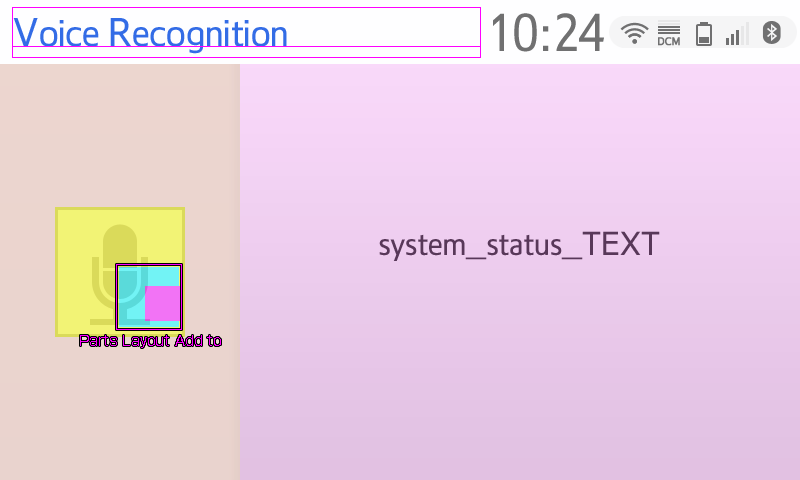
<style>
.page{position:relative;width:800px;height:480px}
.page>*{position:absolute;margin:0}
.t1{font:48px "Tfont1502_T2S";letter-spacing:0.05em;color:#707071}
.t2{font:36px "Tfont1502_T1S";color:#336ce6}
.t3{font:30px "Tfont1502_T1S";color:#583859}
.t4{font:14px "ShinGoPro-Regular";color:#ff00ff}
</style>
<div class="page">
<p class="t1" style="left:493px;top:13px;width:111px;height:39px">10:24</p>
<p class="t2" style="left:13px;top:18px;width:274px;height:36px">Voice Recognition</p>
<p class="t3" style="left:379px;top:231px;width:281px;height:30px">system_status_TEXT</p>
<p class="t4" style="left:80px;top:335px;width:141px;height:13px">Parts Layout Add to</p>
</div>
